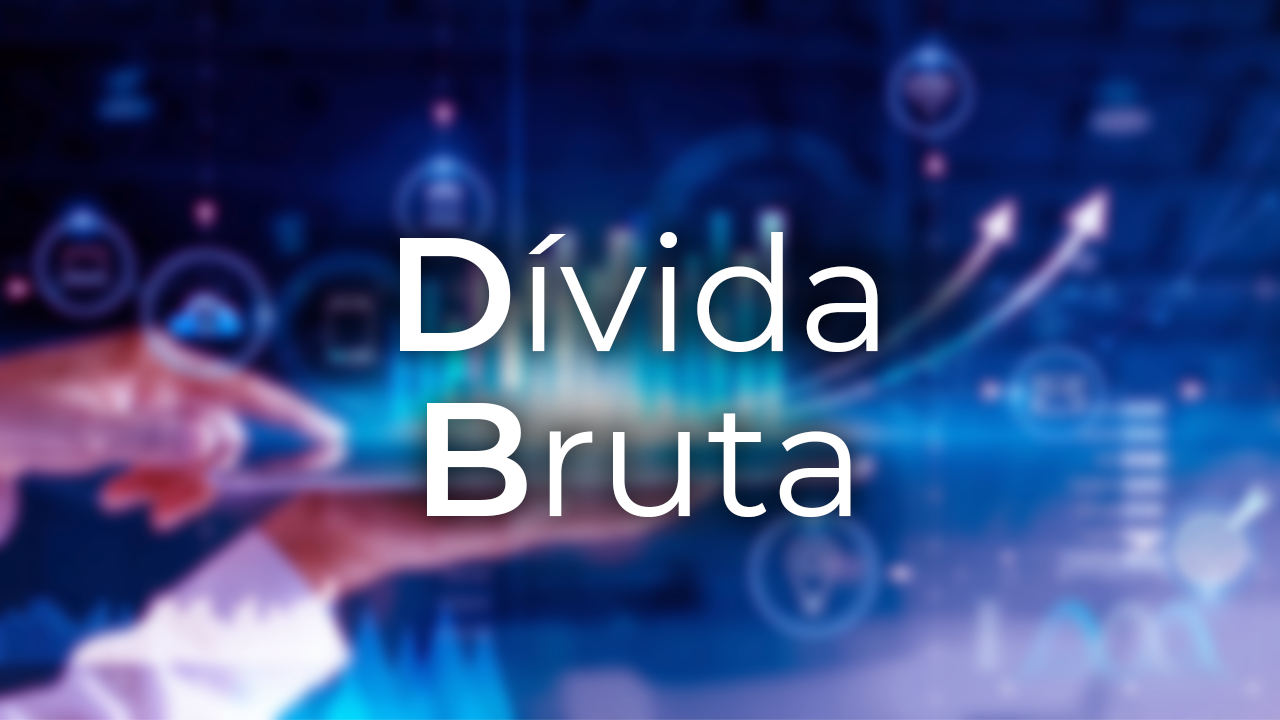
<style>
.page{position:relative;width:1280px;height:720px}
.page>*{position:absolute;margin:0}
.t1{font:160.1px "Montserrat-Regular";color:#ffffff}
.t2{font:160.1px "Montserrat-SemiBold";color:#ffffff}
</style>
<div class="page">
<p class="t1" style="left:400px;top:232px;width:478px;height:120px"><span class="t2">D</span>ívida</p>
<p class="t1" style="left:427px;top:403px;width:424px;height:114px"><span class="t2">B</span>ruta</p>
</div>
